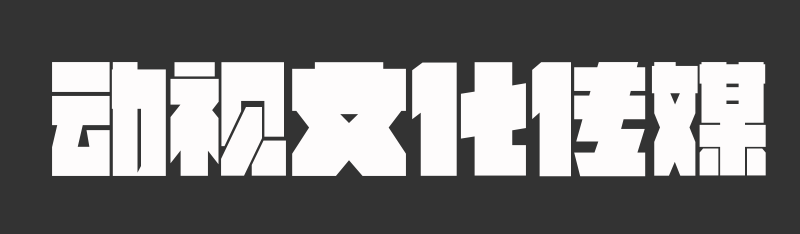
<style>
.page{position:relative;width:800px;height:234px;background:#333333}
.page>*{position:absolute;margin:0}
.t1{font:120px "MFJinHei_Noncommercial-Regular";color:#fefcfc}
</style>
<div class="page">
<p class="t1" style="left:52px;top:62px;width:714px;height:115px">动视文化传媒</p>
</div>
